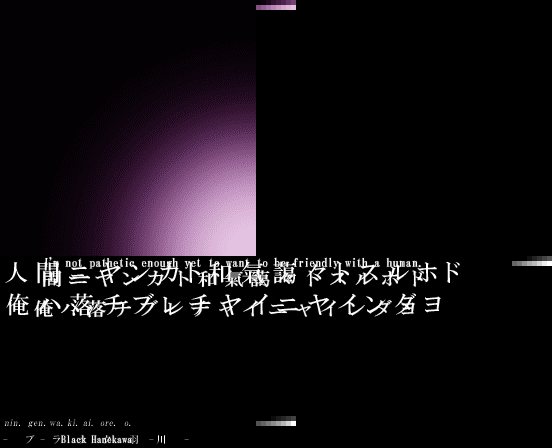
<style>
.page{position:relative;width:552px;height:448px;background:#000000}
.page>*{position:absolute;margin:0}
.t1{font:12px/18px "HGMinchoB";letter-spacing:0.01em;color:#ffffff}
.t2{font:18px/18px "HGMinchoB";letter-spacing:0.3em;color:#ffffff;scale:1.11 1}
.t3{font:18px/30px "HGMinchoB";letter-spacing:0.3em;color:#ffffff;scale:1.11 1}
.t4{font:10px "HGMinchoB";letter-spacing:0.01em;color:#ffffff}
</style>
<div class="page">
<p class="t1" style="left:34px;top:257px;width:390px;height:61px;text-align:center">I'm not pathetic enough yet to want to be friendly with a human.<br><span class="t2">間ニヤンカト和氣藹々トスルホド<br></span><span class="t3">俺ハ落チブレチャイニャインダヨ</span></p>
<p class="t4" style="left:61px;top:435px;width:71px;height:8px">Black Hanekawa</p>
</div>
